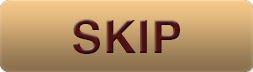
<style>
.page{position:relative;width:253px;height:72px}
.page>*{position:absolute;margin:0}
.t1{font:46px "Helvetica-Bold";letter-spacing:0.025em;color:#4d1212}
</style>
<div class="page">
<p class="t1" style="left:72px;top:19px;width:108px;height:35px">SKIP</p>
</div>
